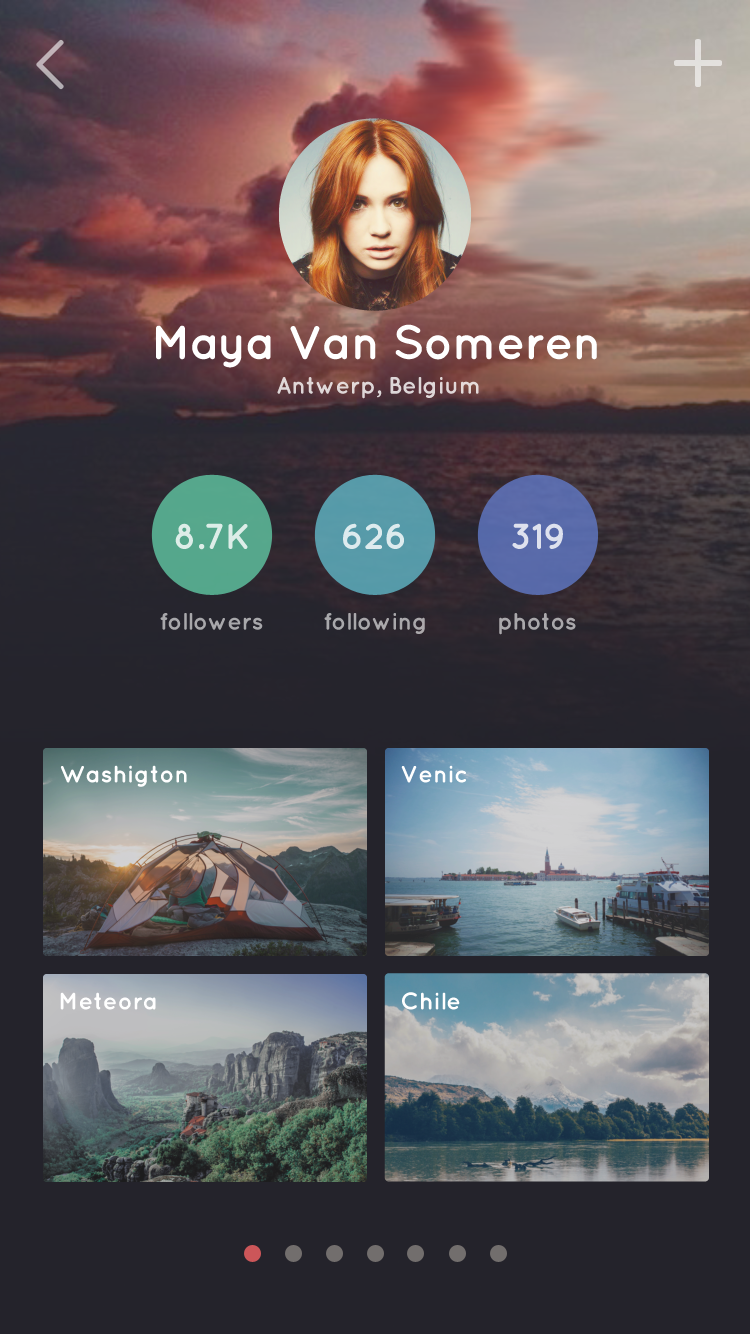
<style>
.page{position:relative;width:750px;height:1334px}
.page>*{position:absolute;margin:0}
.t1{font:48px "Quicksand-Bold";letter-spacing:-0.025em;color:#ffffff}
.t2{font:24px "Quicksand-Bold";letter-spacing:-0.01em;color:#dfd7d8}
.t3{font:36px "Quicksand-Bold";letter-spacing:-0.01em;color:#ddede8}
.t4{font:36px "Quicksand-Bold";letter-spacing:-0.01em;color:#ddebee}
.t5{font:36px "Quicksand-Bold";letter-spacing:-0.01em;color:#dee1ee}
.t6{font:24px "Quicksand-Bold";letter-spacing:-0.02em;color:#a8a8ab}
.t7{font:24px "Quicksand-Bold";letter-spacing:-0.02em;color:#a9a8ab}
.t8{font:24px "Quicksand-Bold";color:#ffffff}
</style>
<div class="page">
<p class="t1" style="left:156px;top:324px;width:441px;height:44px">Maya Van Someren</p>
<p class="t2" style="left:277px;top:377px;width:202px;height:22px">Antwerp, Belgium</p>
<p class="t3" style="left:175px;top:523px;width:73px;height:27px">8.7K</p>
<p class="t4" style="left:343px;top:523px;width:61px;height:26px">626</p>
<p class="t5" style="left:512px;top:523px;width:51px;height:26px">319</p>
<p class="t6" style="left:160px;top:613px;width:103px;height:17px">followers</p>
<p class="t7" style="left:324px;top:613px;width:101px;height:21px">following</p>
<p class="t7" style="left:499px;top:613px;width:77px;height:22px">photos</p>
<p class="t8" style="left:60px;top:765px;width:127px;height:22px">Washigton</p>
<p class="t8" style="left:401px;top:765px;width:65px;height:18px">Venic</p>
<p class="t8" style="left:60px;top:992px;width:96px;height:18px">Meteora</p>
<p class="t8" style="left:402px;top:992px;width:58px;height:18px">Chile</p>
</div>
